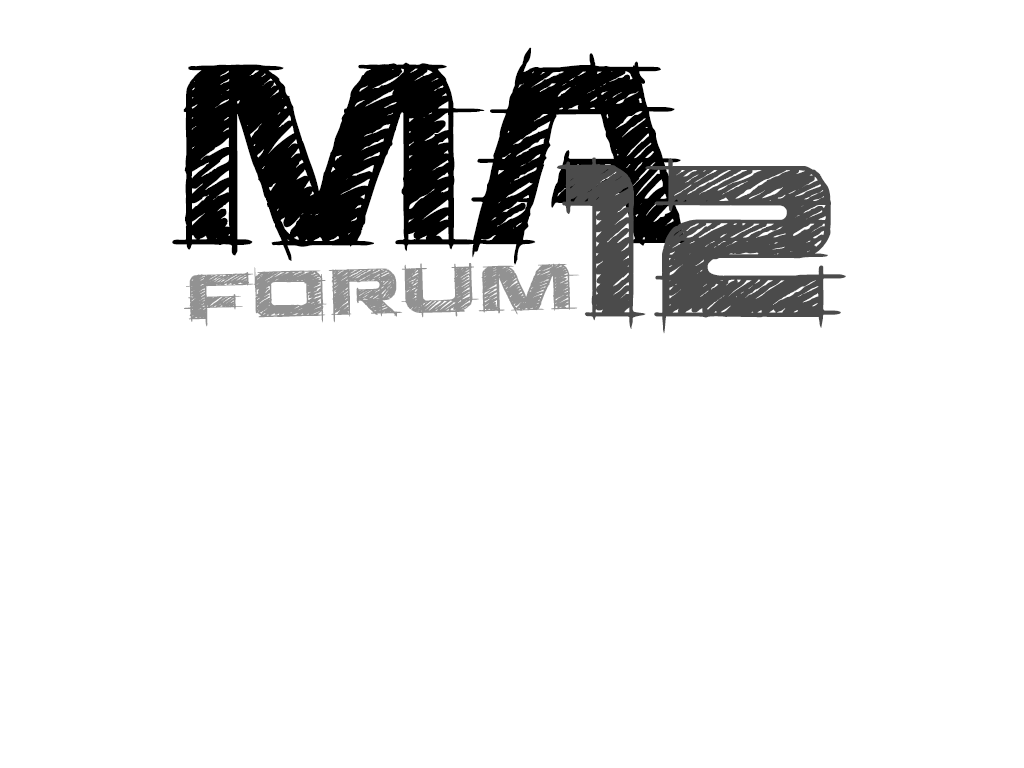
<style>
.page{position:relative;width:1024px;height:768px;background:#ffffff}
.page>*{position:absolute;margin:0}
.t1{font:300px "SaucerBB";color:#000000}
.t2{font:250px "SaucerBB";color:#4b4b4b}
.t3{font:75px "SaucerBB";color:#929292;scale:1.3 1}
</style>
<div class="page">
<p class="t1" style="left:172px;top:47px;width:540px;height:218px">ma</p>
<p class="t2" style="left:556px;top:157px;width:290px;height:177px">12</p>
<p class="t3" style="left:184px;top:263px;width:396px;height:64px;rotate:-2deg">Forum</p>
</div>
